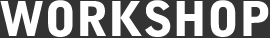
<style>
.page{position:relative;width:270px;height:38px;background:#333333}
.page>*{position:absolute;margin:0}
.t1{font:47.5px "BellGothicStd-Black";color:#ffffff}
</style>
<div class="page">
<p class="t1" style="left:0px;top:0px;width:269px;height:37px">WORKSHOP</p>
</div>
